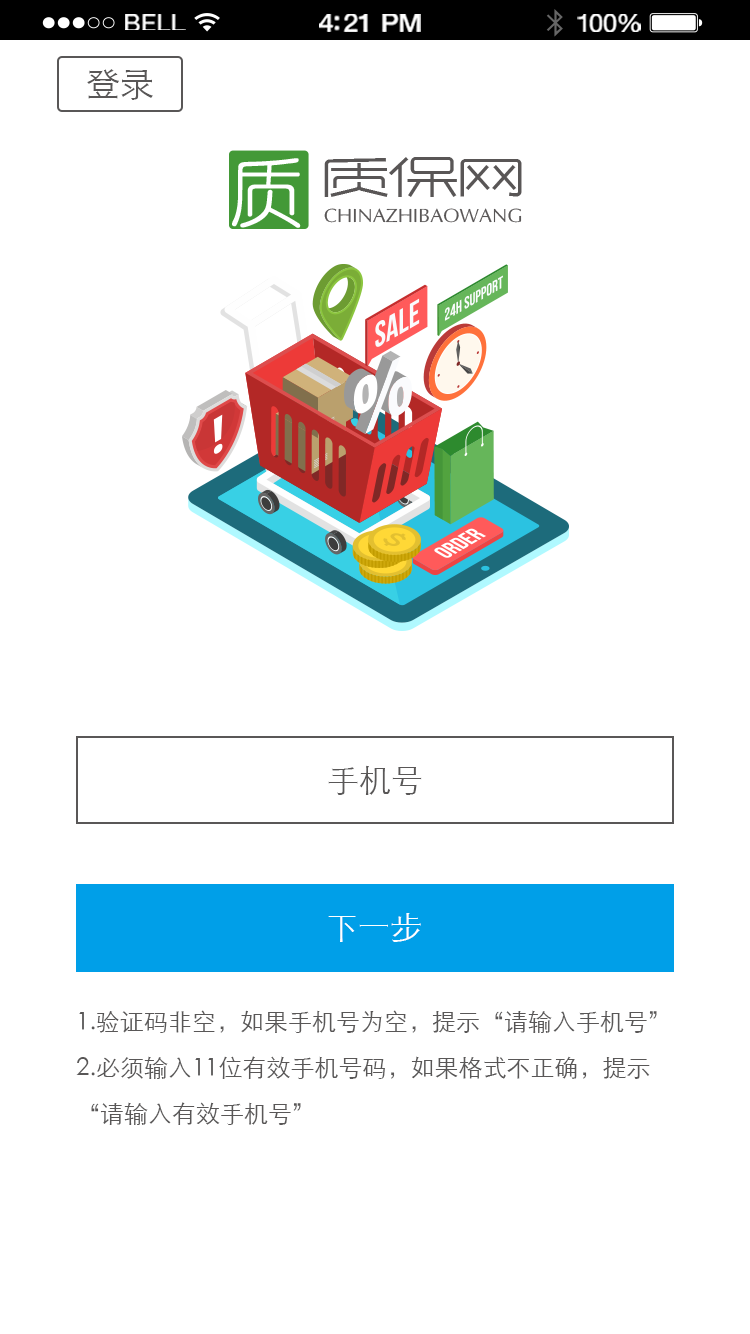
<style>
.page{position:relative;width:750px;height:1334px;background:#ffffff}
.page>*{position:absolute;margin:0}
.t1{font:23.3px "HelveticaNeue";letter-spacing:0.02em;color:#ffffff;scale:1.06 1}
.t2{font:25.3px "HelveticaNeue-Medium";letter-spacing:-0.02em;color:#ffffff;scale:1.06 1}
.t3{font:24.3px "HelveticaNeue";letter-spacing:-0.02em;color:#ffffff;scale:1.06 1}
.t4{font:34px "STXihei";color:#595757}
.t5{font:32px "STXihei";color:#595757}
.t6{font:32px "STXihei";color:#ffffff}
.t7{font:24px/46px "STXihei";color:#595757}
</style>
<div class="page">
<p class="t1" style="left:125px;top:14px;width:61px;height:16px">BELL</p>
<p class="t2" style="left:319px;top:14px;width:102px;height:18px">4:21 PM</p>
<p class="t3" style="left:577px;top:14px;width:64px;height:18px">100%</p>
<p class="t4" style="left:87px;top:69px;width:66px;height:31px">登录</p>
<p class="t5" style="left:328px;top:765px;width:94px;height:30px">手机号</p>
<p class="t6" style="left:328px;top:913px;width:93px;height:29px">下一步</p>
<p class="t7" style="left:76px;top:1010px;width:581px;height:115px">1.验证码非空，如果手机号为空，提示“请输入手机号”<br>2.必须输入11位有效手机号码，如果格式不正确，提示“请输入有效手机号”</p>
</div>
